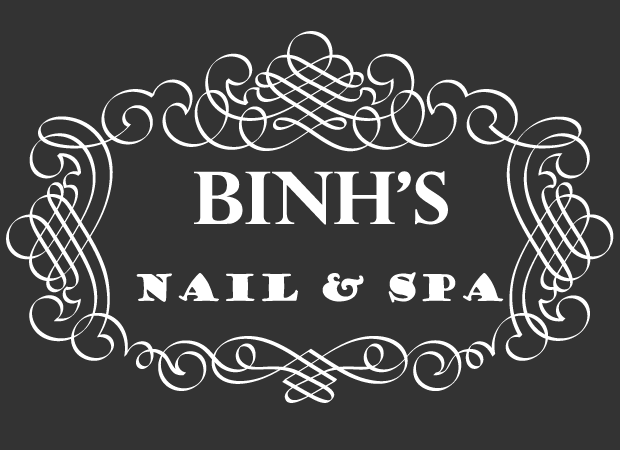
<style>
.page{position:relative;width:620px;height:450px;background:#333333}
.page>*{position:absolute;margin:0}
.t1{font:72px "PerpetuaTitlingMT-Bold";color:#ffffff}
.t2{font:36px "GoudyStout";color:#ffffff}
</style>
<div class="page">
<p class="t1" style="left:194px;top:171px;width:254px;height:54px">BINH’S</p>
<p class="t2" style="left:136px;top:272px;width:368px;height:31px">Nail &amp; Spa</p>
</div>
